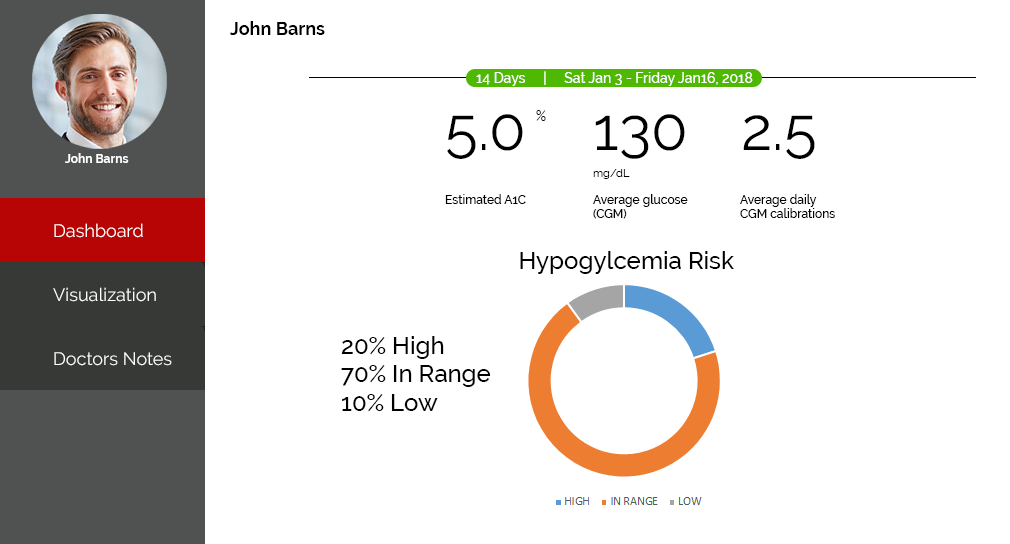
<style>
.page{position:relative;width:1010px;height:544px;background:#ffffff}
.page>*{position:absolute;margin:0}
.t1{font:18px "Raleway-Bold";color:#000000}
.t2{font:14px "Raleway-Medium";color:#ffffff}
.t3{font:14px "Raleway-Regular";color:#000000}
.t4{font:60px "Raleway-Regular";color:#000000}
.t5{font:12px "Raleway-Bold";color:#ffffff}
.t6{font:11px "Raleway-Regular";color:#000000}
.t7{font:12px "Raleway-Medium";color:#000000}
.t8{font:18px "Raleway-Regular";color:#ffffff}
.t9{font:24px "Raleway-Medium";color:#000000}
</style>
<div class="page">
<p class="t1" style="left:230px;top:21px;width:95px;height:14px">John Barns</p>
<p class="t2" style="left:476px;top:71px;width:277px;height:15px">14 Days     |     Sat Jan 3 - Friday Jan16, 2018</p>
<p class="t3" style="left:536px;top:110px;width:10px;height:11px">%</p>
<p class="t4" style="left:447px;top:114px;width:76px;height:45px">5.0</p>
<p class="t4" style="left:595px;top:114px;width:90px;height:45px">130</p>
<p class="t4" style="left:743px;top:115px;width:72px;height:44px">2.5</p>
<p class="t5" style="left:65px;top:153px;width:64px;height:10px">John Barns</p>
<p class="t6" style="left:593px;top:169px;width:37px;height:10px">mg/dL</p>
<p class="t7" style="left:445px;top:194px;width:81px;height:10px">Estimated A1C</p>
<p class="t7" style="left:593px;top:194px;width:95px;height:25px">Average glucose <br>(CGM)</p>
<p class="t7" style="left:740px;top:194px;width:95px;height:24px">Average daily<br>CGM calibrations</p>
<p class="t8" style="left:54px;top:223px;width:89px;height:15px">Dashboard</p>
<p class="t9" style="left:520px;top:251px;width:214px;height:23px">Hypogylcemia Risk</p>
<p class="t8" style="left:53px;top:287px;width:103px;height:15px">Visualization</p>
<p class="t9" style="left:341px;top:336px;width:150px;height:76px">20% High<br>70% In Range<br>10% Low</p>
<p class="t8" style="left:54px;top:352px;width:118px;height:14px">Doctors Notes</p>
</div>
